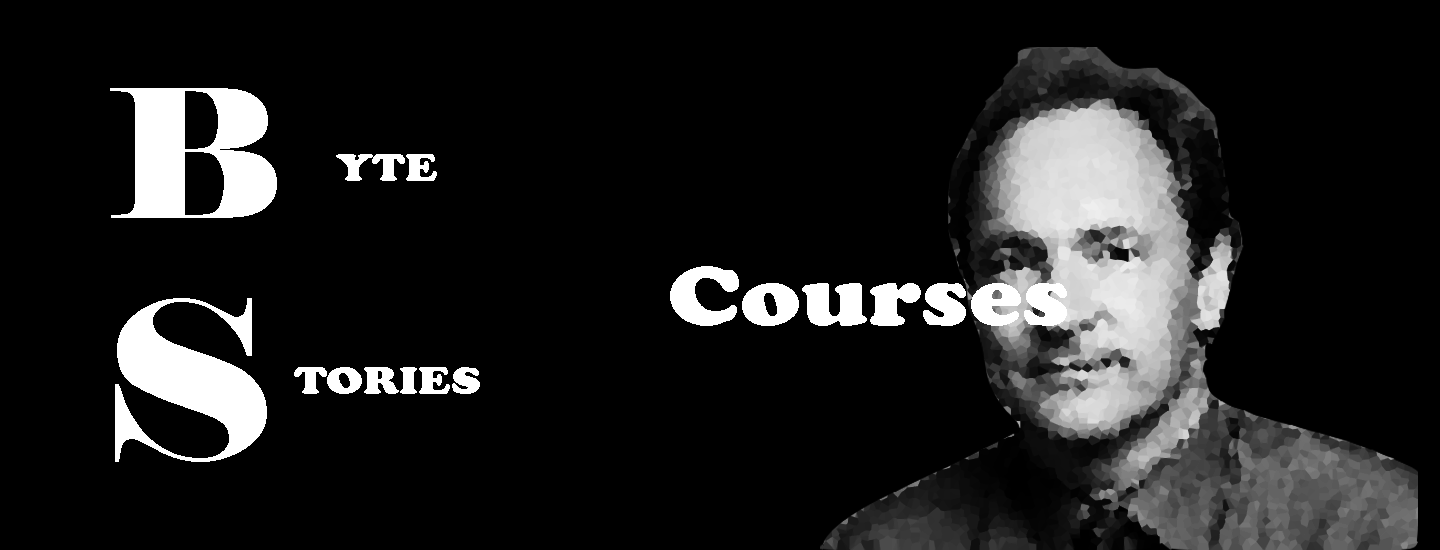
<style>
.page{position:relative;width:1440px;height:550px;background:#000000}
.page>*{position:absolute;margin:0}
.t1{font:177.5px "Elephant-Regular";color:#ffffff;scale:1.15 1}
.t2{font:40.8px "CooperBlack";color:#ffffff;scale:1.15 1}
.t3{font:87px "CooperBlack";color:#ffffff;scale:1.15 1}
.t4{font:218.8px "Elephant-Regular";color:#ffffff;scale:1.15 1}
</style>
<div class="page">
<p class="t1" style="left:110px;top:88px;width:167px;height:130px">B</p>
<p class="t2" style="left:336px;top:154px;width:101px;height:27px">YTE</p>
<p class="t3" style="left:670px;top:266px;width:397px;height:60px">Courses</p>
<p class="t4" style="left:115px;top:298px;width:152px;height:164px">S</p>
<p class="t2" style="left:294px;top:367px;width:186px;height:27px">TORIES</p>
</div>
